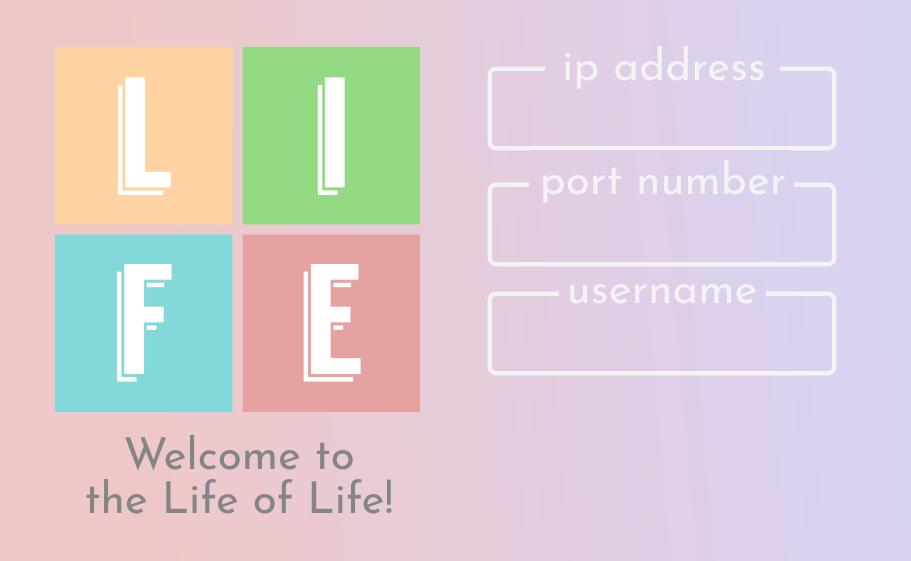
<style>
.page{position:relative;width:911px;height:561px}
.page>*{position:absolute;margin:0}
.t1{font:44px "JosefinSans-Regular";color:#f3f3f3}
.t2{font:44px "JosefinSans-Regular";color:#858585}
</style>
<div class="page">
<p class="t1" style="left:565px;top:45px;width:199px;height:44px">ip address</p>
<p class="t1" style="left:543px;top:159px;width:242px;height:44px">port number</p>
<p class="t1" style="left:570px;top:284px;width:186px;height:20px">username</p>
<p class="t2" style="left:86px;top:434px;width:306px;height:80px;text-align:center">Welcome to<br>the Life of Life!</p>
</div>
